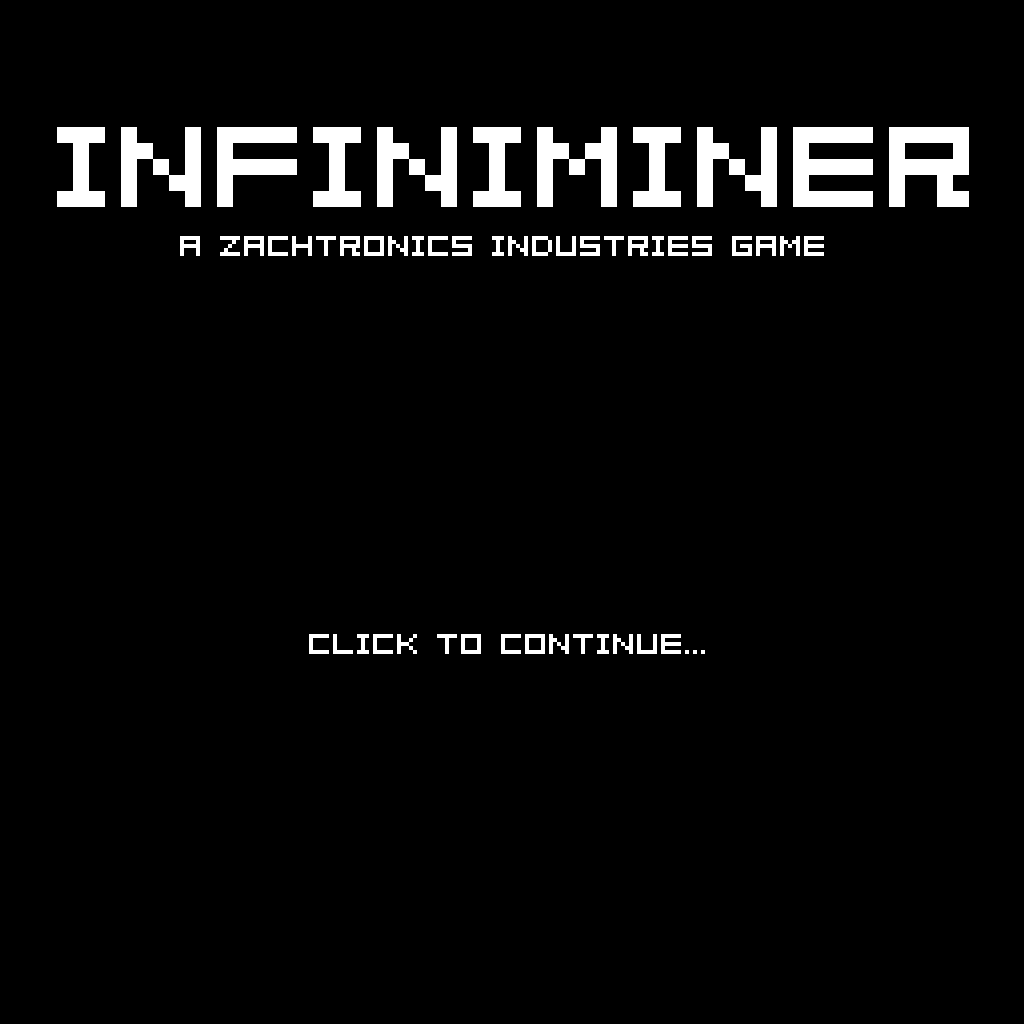
<style>
.page{position:relative;width:1024px;height:1024px;background:#000000}
.page>*{position:absolute;margin:0}
.t1{font:128px "04b08";color:#ffffff}
.t2{font:32px "04b08";color:#ffffff}
</style>
<div class="page">
<p class="t1" style="left:57px;top:127px;width:912px;height:80px">INFINIMINER</p>
<p class="t2" style="left:180px;top:236px;width:644px;height:20px">A ZACHTRONICS INDUSTRIES GAME</p>
<p class="t2" style="left:309px;top:634px;width:396px;height:20px">CLICK TO CONTINUE...</p>
</div>
